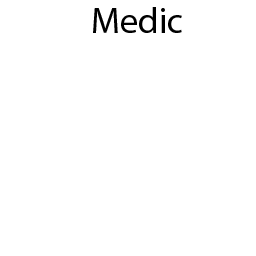
<style>
.page{position:relative;width:256px;height:256px;background:#ffffff}
.page>*{position:absolute;margin:0}
.t1{font:36px "MyriadPro-Regular";color:#000000}
</style>
<div class="page">
<p class="t1" style="left:93px;top:7px;width:89px;height:26px">Medic</p>
</div>
